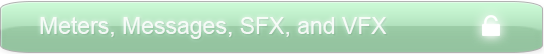
<style>
.page{position:relative;width:544px;height:54px}
.page>*{position:absolute;margin:0}
.t1{font:23px "ArialMT";color:#ffffff}
</style>
<div class="page">
<p class="t1" style="left:40px;top:17px;width:347px;height:22px">Meters, Messages, SFX, and VFX</p>
</div>
